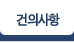
<style>
.page{position:relative;width:74px;height:43px;background:#ffffff}
.page>*{position:absolute;margin:0}
.t1{font:14px "SandTg";letter-spacing:-0.075em;color:#203d62;font-weight:bold;scale:0.9 1}
</style>
<div class="page">
<p class="t1" style="left:16px;top:13px;width:44px;height:13px">건의사항</p>
</div>
